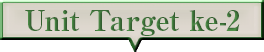
<style>
.page{position:relative;width:264px;height:52px;background:#ffffff}
.page>*{position:absolute;margin:0}
.t1{font:28px "RyuminPro-ExBold";color:#3d6f39}
</style>
<div class="page">
<p class="t1" style="left:25px;top:10px;width:215px;height:26px">Unit Target ke-2</p>
</div>
